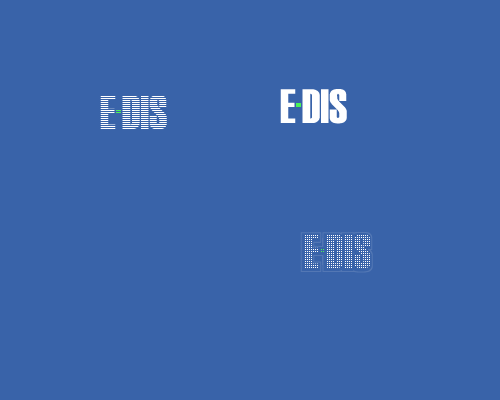
<style>
.page{position:relative;width:500px;height:400px;background:#3963a9}
.page>*{position:absolute;margin:0}
.t1{font:48px "Haettenschweiler";color:#ffffff}
</style>
<div class="page">
<p class="t1" style="left:280px;top:89px;width:16px;height:34px">E</p>
<p class="t1" style="left:302px;top:89px;width:45px;height:35px">DIS</p>
</div>
